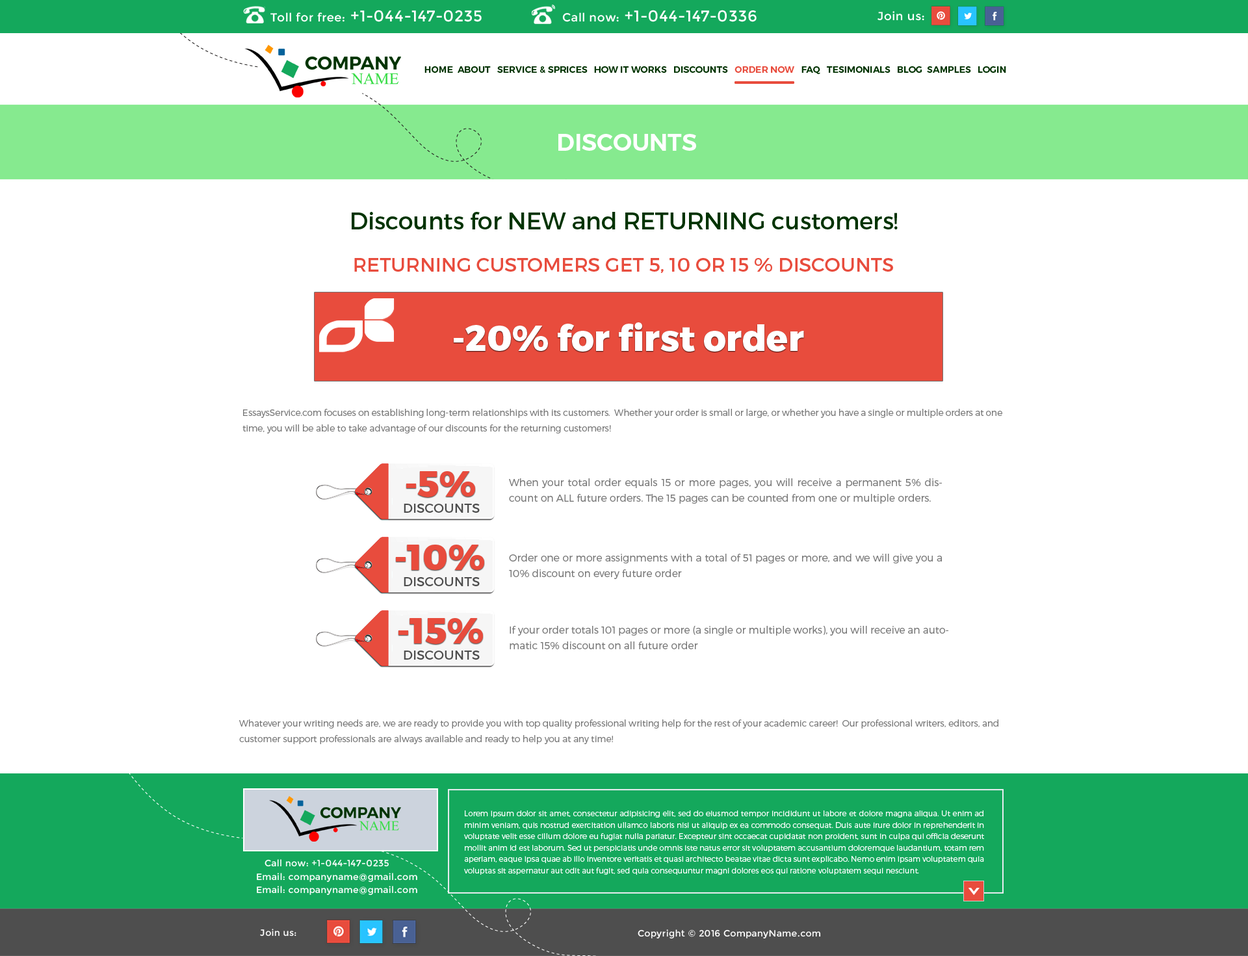
<style>
.page{position:relative;width:1248px;height:956px;background:#ffffff}
.page>*{position:absolute;margin:0}
.t1{font:15.6px "Montserrat-Regular";letter-spacing:0.025em;color:#ffffff}
.t2{font:11.7px "Montserrat-Regular";letter-spacing:0.025em;color:#ffffff}
.t3{font:9.1px "Montserrat-SemiBold";color:#003300;text-transform:uppercase}
.t4{font:9.1px "Montserrat-SemiBold";color:#e84c3d;text-transform:uppercase}
.t5{font:23.4px "Montserrat-SemiBold";color:#ffffff;text-transform:uppercase}
.t6{font:23.4px "Montserrat-Regular";color:#003300}
.t7{font:19.5px "Montserrat-Regular";color:#e84c3d}
.t8{font:35.7px "Montserrat-ExtraBold";color:#ffffff}
.t9{font:8.9px/15.8px "Montserrat-Light";color:#777777}
.t10{font:35.7px "Montserrat-ExtraBold";color:#e84c3d}
.t11{font:10.1px/15.8px "Montserrat-Light";color:#777777}
.t12{font:13px "Montserrat-Regular";color:#4e4e4e;text-transform:uppercase}
.t13{font:7.6px/11.4px "Montserrat-Light";color:#ffffff}
.t14{font:9.1px "Montserrat-Regular";letter-spacing:0.025em;color:#ffffff}
</style>
<div class="page">
<p class="t1" style="left:270px;top:10px;width:211px;height:12px"><span class="t2">Toll for free:</span> +1-044-147-0235</p>
<p class="t1" style="left:562px;top:10px;width:194px;height:12px"><span class="t2">Call now:</span> +1-044-147-0336</p>
<p class="t2" style="left:877px;top:11px;width:47px;height:10px">Join us:</p>
<p class="t3" style="left:424px;top:66px;width:582px;height:8px">Home  ABOUT   SERVICE &amp; SPriCES   HOw it works   Discounts   <span class="t4">Order Now   </span>FAQ   Tesimonials   Blog  Samples   Login</p>
<p class="t5" style="left:558px;top:134px;width:138px;height:17px">Discounts</p>
<p class="t6" style="left:352px;top:212px;width:545px;height:17px">Discounts for NEW and RETURNING customers!</p>
<p class="t7" style="left:354px;top:258px;width:539px;height:15px">RETURNING CUSTOMERS GET 5, 10 OR 15 % DISCOUNTS</p>
<p class="t8" style="left:454px;top:322px;width:350px;height:30px">-20% for first order</p>
<p class="t9" style="left:242px;top:409px;width:760px;height:24px;text-align:justify">EssaysService.com focuses on establishing long-term relationships with its customers.  Whether your order is small or large, or whether you have a single or multiple orders at one time, you will be able to take advantage of our discounts for the returning customers!</p>
<p class="t10" style="left:406px;top:471px;width:69px;height:26px">-5%</p>
<p class="t11" style="left:509px;top:478px;width:433px;height:26px;text-align:justify">When your total order equals 15 or more pages, you will receive a permanent 5% discount on ALL future orders. The 15 pages can be counted from one or multiple orders.</p>
<p class="t12" style="left:404px;top:504px;width:76px;height:9px">Discounts</p>
<p class="t10" style="left:396px;top:545px;width:88px;height:25px">-10%</p>
<p class="t11" style="left:509px;top:554px;width:433px;height:25px;text-align:justify">Order one or more assignments with a total of 51 pages or more, and we will give you a 10% discount on every future order</p>
<p class="t12" style="left:404px;top:577px;width:76px;height:9px">Discounts</p>
<p class="t10" style="left:398px;top:618px;width:85px;height:26px">-15%</p>
<p class="t11" style="left:509px;top:626px;width:439px;height:23px;text-align:justify">If your order totals 101 pages or more (a single or multiple works), you will receive an automatic 15% discount on all future order</p>
<p class="t12" style="left:404px;top:650px;width:76px;height:10px">Discounts</p>
<p class="t9" style="left:239px;top:719px;width:759px;height:25px;text-align:justify">Whatever your writing needs are, we are ready to provide you with top quality professional writing help for the rest of your academic career!  Our professional writers, editors, and customer support professionals are always available and ready to help you at any time!</p>
<p class="t13" style="left:464px;top:810px;width:520px;height:65px;text-align:justify">Lorem ipsum dolor sit amet, consectetur adipisicing elit, sed do eiusmod tempor incididunt ut labore et dolore magna aliqua. Ut enim ad minim veniam, quis nostrud exercitation ullamco laboris nisi ut aliquip ex ea commodo consequat. Duis aute irure dolor in reprehenderit in voluptate velit esse cillum dolore eu fugiat nulla pariatur. Excepteur sint occaecat cupidatat non proident, sunt in culpa qui officia deserunt mollit anim id est laborum. Sed ut perspiciatis unde omnis iste natus error sit voluptatem accusantium doloremque laudantium, totam rem aperiam, eaque ipsa quae ab illo inventore veritatis et quasi architecto beatae vitae dicta sunt explicabo. Nemo enim ipsam voluptatem quia voluptas sit aspernatur aut odit aut fugit, sed quia consequuntur magni dolores eos qui ratione voluptatem sequi nesciunt.</p>
<p class="t14" style="left:264px;top:859px;width:125px;height:8px">Call now: +1-044-147-0235</p>
<p class="t14" style="left:257px;top:873px;width:160px;height:9px">Email: companyname@gmail.com</p>
<p class="t14" style="left:257px;top:886px;width:160px;height:9px">Email: companyname@gmail.com</p>
<p class="t14" style="left:260px;top:929px;width:36px;height:7px">Join us:</p>
<p class="t14" style="left:637px;top:929px;width:184px;height:10px">Copyright © 2016 CompanyName.com</p>
</div>
